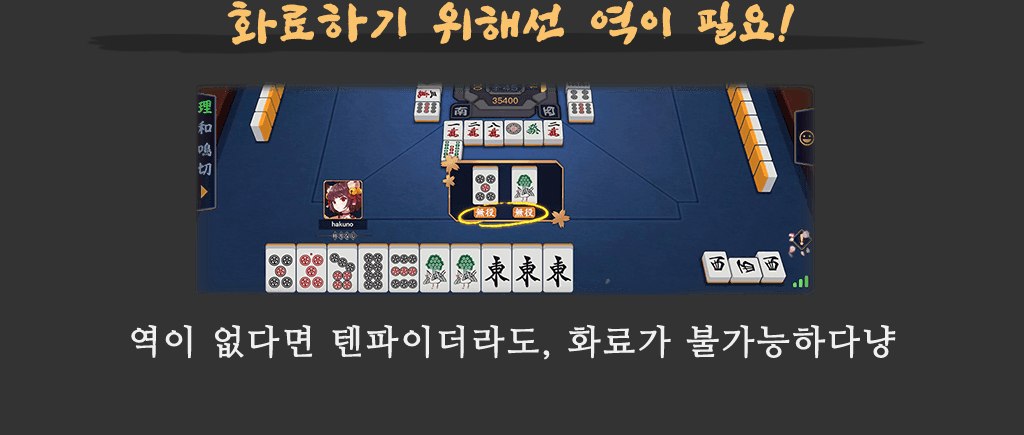
<style>
.page{position:relative;width:1024px;height:435px;background:#333333}
.page>*{position:absolute;margin:0}
.t1{font:48px "SangSangRockOTF";letter-spacing:0.06em;color:#fac26a;font-weight:bold}
.t2{font:34px "NanumMyeongjo";letter-spacing:0.06em;color:#f0f0ef;font-weight:bold}
</style>
<div class="page">
<p class="t1" style="left:227px;top:1px;width:568px;height:44px">화료하기 위해선 역이 필요!</p>
<p class="t2" style="left:131px;top:324px;width:765px;height:36px">역이 없다면 텐파이더라도, 화료가 불가능하다냥</p>
</div>
